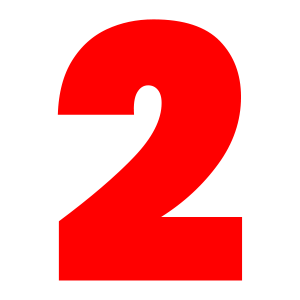
<style>
.page{position:relative;width:300px;height:300px;background:#ffffff}
.page>*{position:absolute;margin:0}
.t1{font:354.2px "Poppins-Black";color:#ff0000}
</style>
<div class="page">
<p class="t1" style="left:57px;top:19px;width:186px;height:262px">2</p>
</div>
